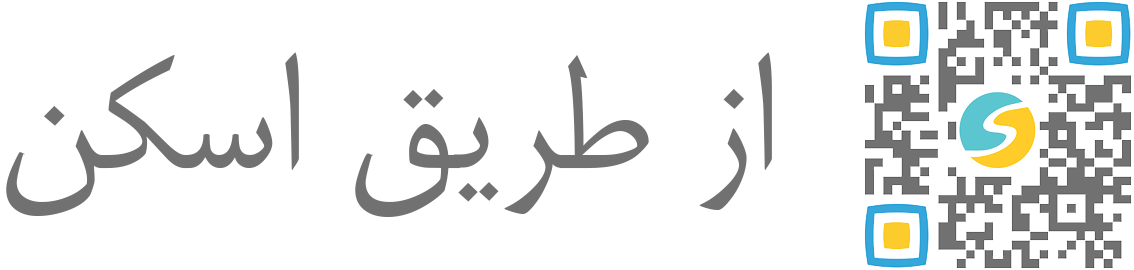
<style>
.page{position:relative;width:1134px;height:270px;background:#ffffff}
.page>*{position:absolute;margin:0}
.t1{font:192px "BMitra";color:#717171}
</style>
<div class="page">
<p class="t1" style="left:6px;top:52px;width:766px;height:165px">از طریق اسکن</p>
</div>
